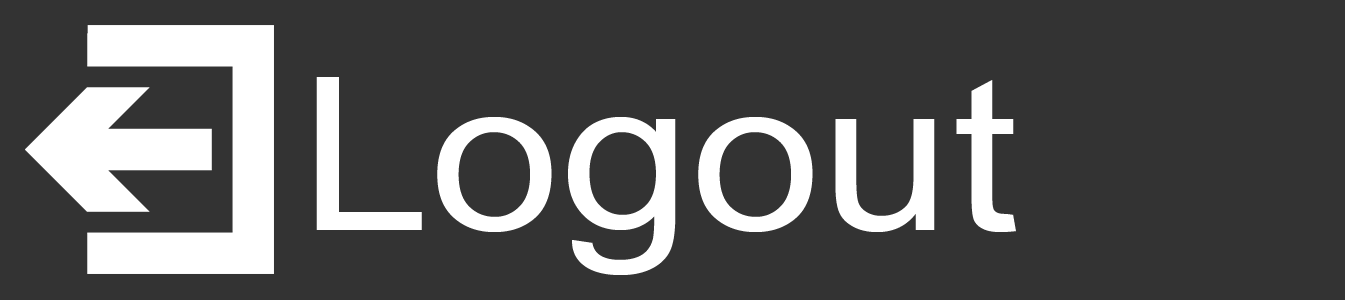
<style>
.page{position:relative;width:1345px;height:300px;background:#333333}
.page>*{position:absolute;margin:0}
.t1{font:214.4px "ArialNarrow";color:#ffffff;scale:1.33 1}
</style>
<div class="page">
<p class="t1" style="left:316px;top:77px;width:700px;height:198px">Logout</p>
</div>
